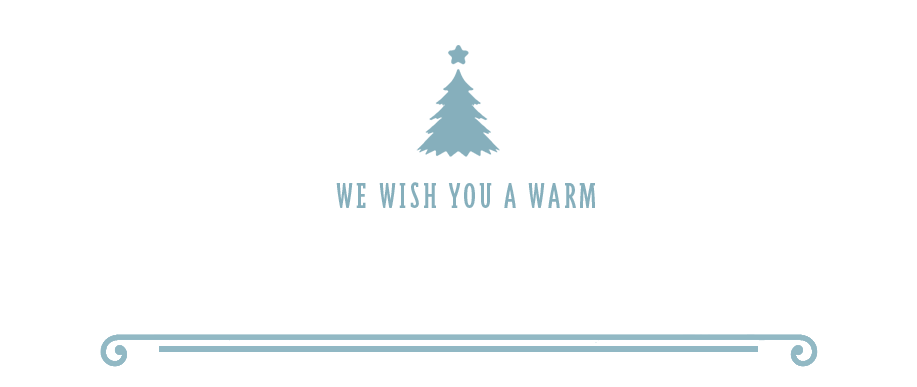
<style>
.page{position:relative;width:917px;height:387px;background:#ffffff}
.page>*{position:absolute;margin:0}
.t1{font:41.7px "TriplexSerif-CondReg";letter-spacing:0.08em;color:#86afbc}
</style>
<div class="page">
<p class="t1" style="left:336px;top:182px;width:259px;height:26px">WE WISH YOU A WARM</p>
</div>
